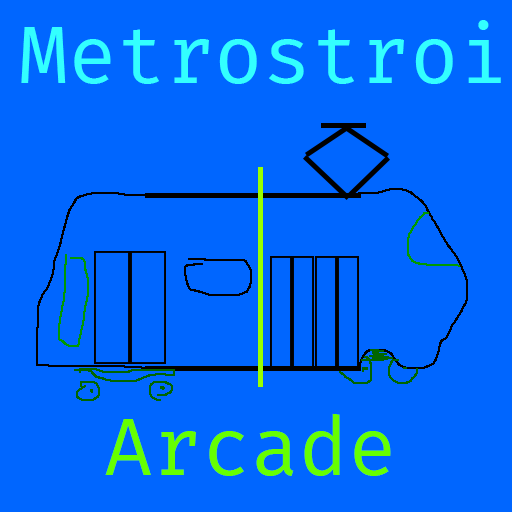
<style>
.page{position:relative;width:512px;height:512px;background:#0066ff}
.page>*{position:absolute;margin:0}
.t1{font:81.5px "FiraCodeNerdFontComplet-Regular";color:#33ffff}
.t2{font:81.5px "FiraCodeNerdFontComplet-Regular";color:#66ff00}
</style>
<div class="page">
<p class="t1" style="left:21px;top:20px;width:480px;height:64px">Metrostroi</p>
<p class="t2" style="left:105px;top:413px;width:286px;height:63px">Arcade</p>
</div>
